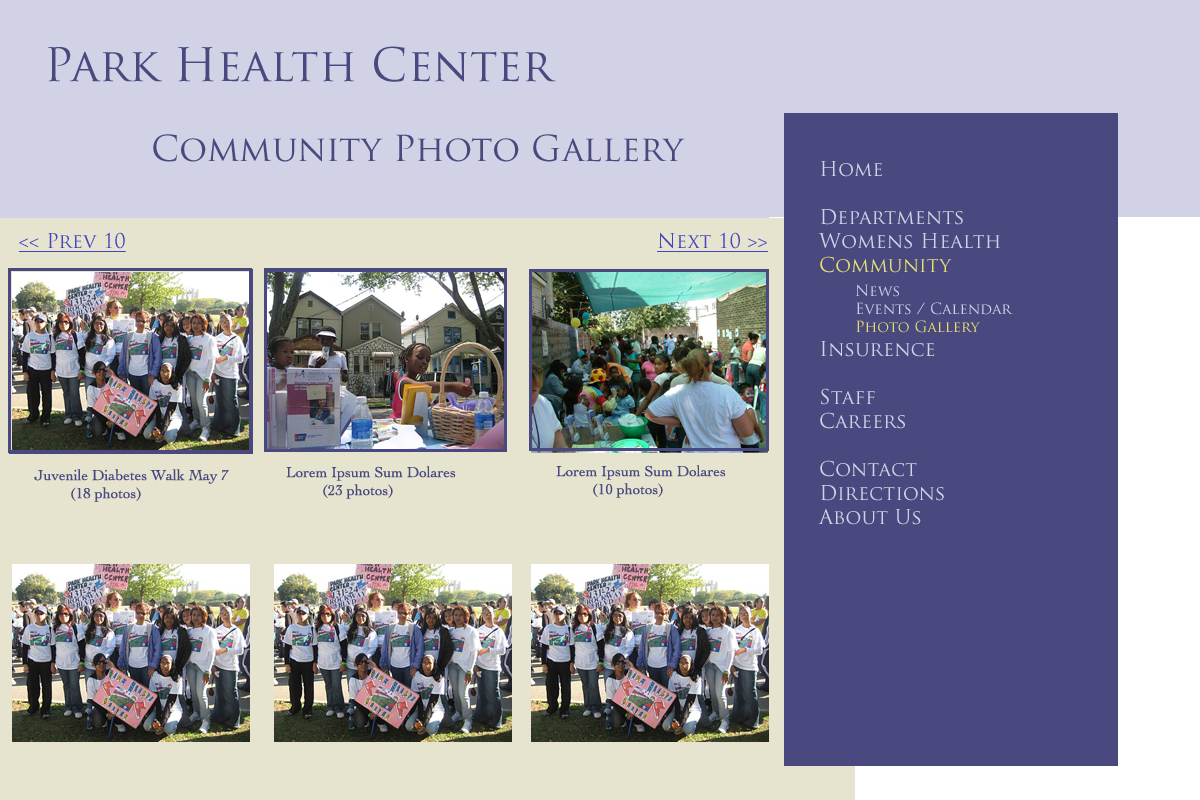
<style>
.page{position:relative;width:1200px;height:800px;background:#494980}
.page>*{position:absolute;margin:0}
.t1{font:45px "TrajanPro-Regular";color:#494980}
.t2{font:35px "TrajanPro-Regular";color:#494980}
.t3{font:20px "TrajanPro-Regular";color:#d2d2e6}
.t4{font:20px "TrajanPro-Regular";color:#e6e073}
.t5{font:15px "TrajanPro-Regular";color:#d2d2e6}
.t6{font:15px "TrajanPro-Regular";color:#e6e073}
.t7{font:20px "TrajanPro-Regular";color:#4444bf;text-decoration:underline}
.t8{font:15px "Cochin";color:#494980}
</style>
<div class="page">
<p class="t1" style="left:48px;top:46px;width:508px;height:36px">Park Health Center</p>
<p class="t2" style="left:153px;top:134px;width:532px;height:28px">Community Photo Gallery</p>
<p class="t3" style="left:818px;top:161px;width:195px;height:364px">Home<br><br>Departments<br>Womens Health<br><span class="t4">Community<br> </span><span class="t5">News<br> Events / Calendar<br> </span><span class="t6">Photo Gallery<br></span>Insurence<br><br>Staff<br>Careers<br><br>Contact<br>Directions<br>About Us</p>
<p class="t7" style="left:19px;top:232px;width:749px;height:20px">&lt;&lt; Prev 10                   Next 10 &gt;&gt;</p>
<p class="t8" style="left:34px;top:469px;width:195px;height:33px">Juvenile Diabetes Walk May 7<br> (18 photos)</p>
<p class="t8" style="left:286px;top:466px;width:170px;height:33px">Lorem Ipsum Sum Dolares<br> (23 photos)</p>
<p class="t8" style="left:556px;top:465px;width:170px;height:33px">Lorem Ipsum Sum Dolares<br> (10 photos)</p>
</div>
